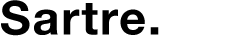
<style>
.page{position:relative;width:250px;height:36px;background:#ffffff}
.page>*{position:absolute;margin:0}
.t1{font:47px "HelveticaNeue-Bold";letter-spacing:0.04em;color:#000000}
</style>
<div class="page">
<p class="t1" style="left:1px;top:0px;width:158px;height:36px">Sartre.</p>
</div>
